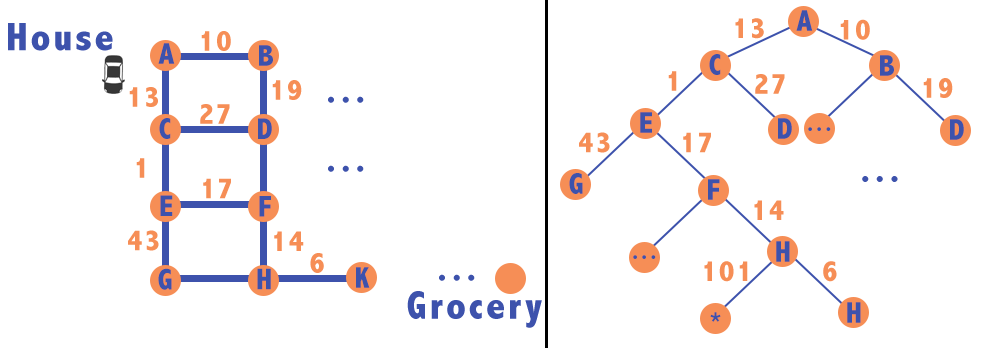
<style>
.page{position:relative;width:986px;height:348px;background:#ffffff}
.page>*{position:absolute;margin:0}
.t1{font:30px "AbadiMT-CondensedExtraBold";letter-spacing:0.075em;color:#3d52ac}
.t2{font:40px "AbadiMT-CondensedExtraBold";letter-spacing:0.075em;color:#3d52ac}
.t3{font:30px "AbadiMT-CondensedExtraBold";letter-spacing:0.075em;color:#f68e56}
.t4{font:25px "AbadiMT-CondensedExtraBold";letter-spacing:0.075em;color:#3d52ac}
</style>
<div class="page">
<p class="t1" style="left:796px;top:10px;width:17px;height:21px">A</p>
<p class="t2" style="left:8px;top:23px;width:105px;height:28px">House</p>
<p class="t3" style="left:840px;top:19px;width:30px;height:21px">10</p>
<p class="t3" style="left:201px;top:31px;width:30px;height:20px">10</p>
<p class="t1" style="left:158px;top:43px;width:17px;height:21px">A</p>
<p class="t1" style="left:259px;top:45px;width:14px;height:21px">B</p>
<p class="t1" style="left:709px;top:54px;width:12px;height:21px">C</p>
<p class="t1" style="left:880px;top:55px;width:14px;height:21px">B</p>
<p class="t3" style="left:668px;top:71px;width:9px;height:20px">1</p>
<p class="t3" style="left:755px;top:74px;width:30px;height:20px">27</p>
<p class="t3" style="left:923px;top:78px;width:30px;height:20px">19</p>
<p class="t3" style="left:129px;top:87px;width:29px;height:20px">13</p>
<p class="t3" style="left:272px;top:80px;width:30px;height:20px">19</p>
<p class="t2" style="left:328px;top:96px;width:36px;height:7px">...</p>
<p class="t3" style="left:200px;top:104px;width:30px;height:20px">27</p>
<p class="t1" style="left:640px;top:112px;width:12px;height:21px">E</p>
<p class="t1" style="left:159px;top:118px;width:12px;height:21px">C</p>
<p class="t1" style="left:258px;top:118px;width:14px;height:21px">D</p>
<p class="t1" style="left:778px;top:118px;width:14px;height:21px">D</p>
<p class="t1" style="left:950px;top:119px;width:14px;height:21px">D</p>
<p class="t3" style="left:579px;top:132px;width:31px;height:21px">43</p>
<p class="t3" style="left:683px;top:132px;width:28px;height:21px">17</p>
<p class="t4" style="left:808px;top:127px;width:23px;height:4px">...</p>
<p class="t3" style="left:136px;top:158px;width:9px;height:20px">1</p>
<p class="t2" style="left:328px;top:165px;width:36px;height:7px">...</p>
<p class="t1" style="left:569px;top:173px;width:14px;height:21px">G</p>
<p class="t3" style="left:203px;top:178px;width:28px;height:21px">17</p>
<p class="t1" style="left:708px;top:179px;width:12px;height:21px">F</p>
<p class="t2" style="left:862px;top:176px;width:36px;height:6px">...</p>
<p class="t1" style="left:160px;top:195px;width:13px;height:21px">E</p>
<p class="t1" style="left:259px;top:196px;width:12px;height:21px">F</p>
<p class="t3" style="left:754px;top:200px;width:30px;height:20px">14</p>
<p class="t3" style="left:128px;top:230px;width:31px;height:21px">43</p>
<p class="t3" style="left:274px;top:231px;width:30px;height:20px">14</p>
<p class="t1" style="left:776px;top:241px;width:14px;height:21px">H</p>
<p class="t3" style="left:310px;top:253px;width:14px;height:20px">6</p>
<p class="t4" style="left:633px;top:255px;width:23px;height:4px">...</p>
<p class="t1" style="left:158px;top:268px;width:14px;height:22px">G</p>
<p class="t1" style="left:257px;top:268px;width:14px;height:22px">H</p>
<p class="t1" style="left:356px;top:267px;width:14px;height:21px">K</p>
<p class="t3" style="left:704px;top:261px;width:44px;height:21px">101</p>
<p class="t3" style="left:823px;top:261px;width:14px;height:21px">6</p>
<p class="t2" style="left:439px;top:274px;width:36px;height:7px">...</p>
<p class="t2" style="left:407px;top:291px;width:135px;height:37px">Grocery</p>
<p class="t1" style="left:847px;top:302px;width:14px;height:21px">H</p>
<p class="t1" style="left:710px;top:312px;width:11px;height:10px;rotate:180deg">*</p>
</div>
